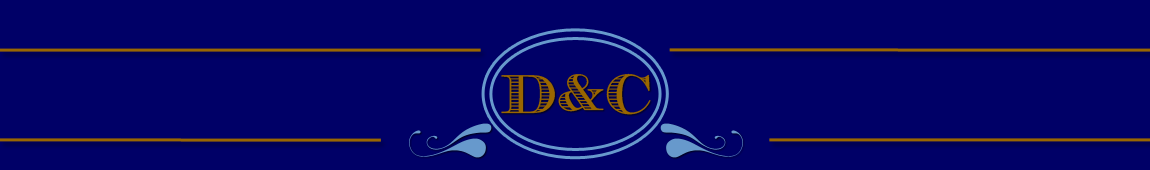
<style>
.page{position:relative;width:1150px;height:170px;background:#000067}
.page>*{position:absolute;margin:0}
.t1{font:52px "ChevalierStrDCD";color:#996600}
</style>
<div class="page">
<p class="t1" style="left:501px;top:73px;width:150px;height:42px">D&amp;C</p>
</div>
